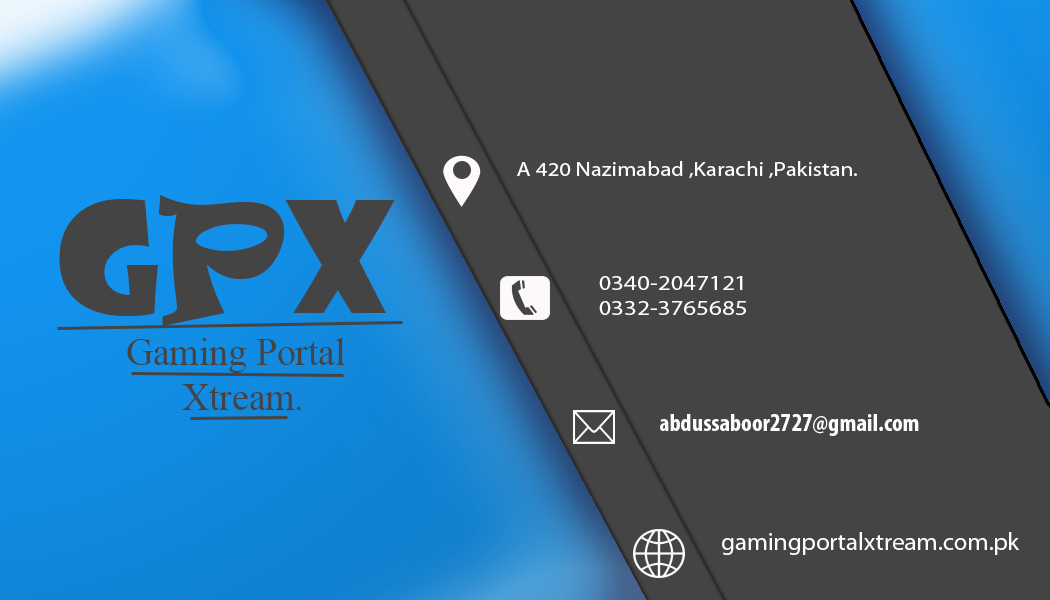
<style>
.page{position:relative;width:1050px;height:600px;background:#444444}
.page>*{position:absolute;margin:0}
.t1{font:20.2px "MyriadPro-Regular";color:#fefbfb;scale:1.13 1}
.t2{font:150px "ShowcardGothic-Reg";color:#444444}
.t3{font:150px "Ravie";color:#444444}
.t4{font:20.8px "MyriadPro-Regular";color:#fefbfb;scale:1.2 1}
.t5{font:37.5px "TimesNewRomanPSMT";color:#444444}
.t6{font:25px "MyriadPro-BoldCond";color:#fefbfb}
.t7{font:25px "MyriadPro-Regular";color:#fefbfb}
</style>
<div class="page">
<p class="t1" style="left:517px;top:161px;width:340px;height:18px">A 420 Nazimabad ,Karachi ,Pakistan.</p>
<p class="t2" style="left:59px;top:195px;width:336px;height:131px">G<span class="t3">P</span>X</p>
<p class="t4" style="left:599px;top:276px;width:147px;height:39px">0340-2047121<br>0332-3765685</p>
<p class="t5" style="left:127px;top:338px;width:218px;height:72px">Gaming Portal <br>             Xtream.</p>
<p class="t6" style="left:660px;top:414px;width:259px;height:22px">abdussaboor2727@gmail.com</p>
<p class="t7" style="left:722px;top:532px;width:298px;height:23px">gamingportalxtream.com.pk</p>
</div>
